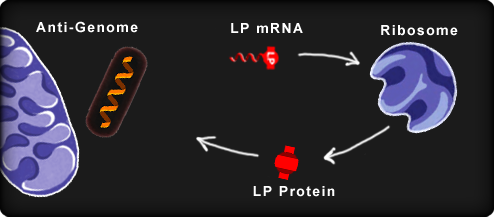
<style>
.page{position:relative;width:494px;height:217px;background:#1b1b1b}
.page>*{position:absolute;margin:0}
.t1{font:14px "Arial-BoldMT";letter-spacing:0.1em;color:#ffffff}
</style>
<div class="page">
<p class="t1" style="left:36px;top:21px;width:102px;height:12px">Anti-Genome</p>
<p class="t1" style="left:231px;top:23px;width:72px;height:10px">LP mRNA</p>
<p class="t1" style="left:381px;top:25px;width:77px;height:11px">Ribosome</p>
<p class="t1" style="left:253px;top:186px;width:82px;height:11px">LP Protein</p>
</div>
